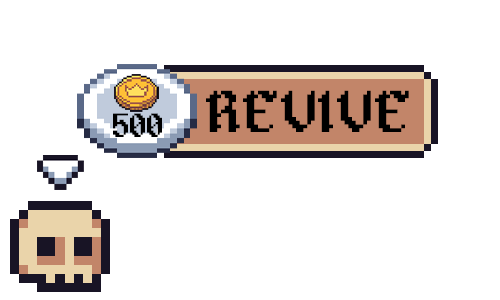
<style>
.page{position:relative;width:500px;height:300px;background:#ffffff}
.page>*{position:absolute;margin:0}
.t1{font:60px "Alagard";color:#000000}
.t2{font:34.3px "Alagard";color:#000000}
</style>
<div class="page">
<p class="t1" style="left:206px;top:90px;width:203px;height:42px">REVIVE</p>
<p class="t2" style="left:113px;top:113px;width:49px;height:24px">500</p>
</div>
